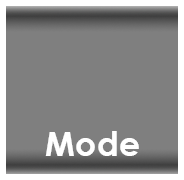
<style>
.page{position:relative;width:184px;height:180px;background:#7f7f7f}
.page>*{position:absolute;margin:0}
.t1{font:33.3px "CenturyGothic-Bold";color:#ffffff}
</style>
<div class="page">
<p class="t1" style="left:45px;top:131px;width:94px;height:25px">Mode</p>
</div>
